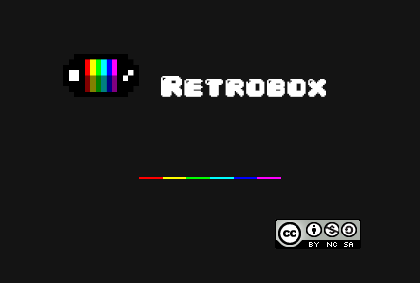
<style>
.page{position:relative;width:420px;height:283px;background:#141414}
.page>*{position:absolute;margin:0}
.t1{font:25px "04b30";color:#ffffff}
</style>
<div class="page">
<p class="t1" style="left:161px;top:76px;width:165px;height:21px">Retrobox</p>
</div>
